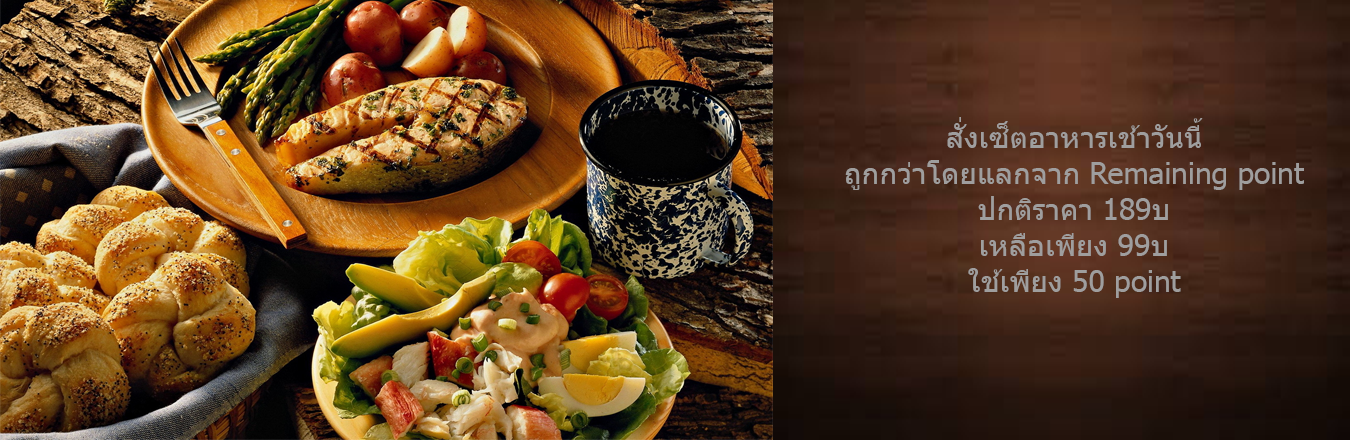
<style>
.page{position:relative;width:1350px;height:440px}
.page>*{position:absolute;margin:0}
.t1{font:30px "Tahoma";color:#9f9e9e}
</style>
<div class="page">
<p class="t1" style="left:845px;top:117px;width:459px;height:181px;text-align:center">สั่งเซ็ตอาหารเช้าวันนี้<br>ถูกกว่าโดยแลกจาก Remaining point<br>ปกติราคา 189บ<br>เหลือเพียง 99บ<br>ใช้เพียง 50 point</p>
</div>
